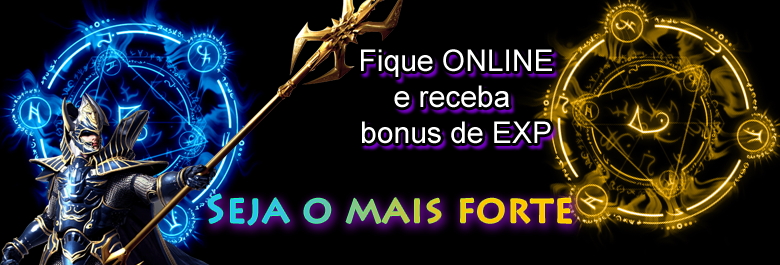
<style>
.page{position:relative;width:780px;height:265px;background:#000000}
.page>*{position:absolute;margin:0}
.t1{font:30px "ArialMT";color:#ffffff}
.t2{font:38px "LithosPro-Regular";font-weight:bold}
</style>
<div class="page">
<p class="t1" style="left:361px;top:49px;width:191px;height:95px;text-align:center">Fique ONLINE<br>e receba <br>bonus de EXP</p>
<p class="t2" style="left:208px;top:194px;width:363px;height:31px">Seja o mais forte</p>
</div>
